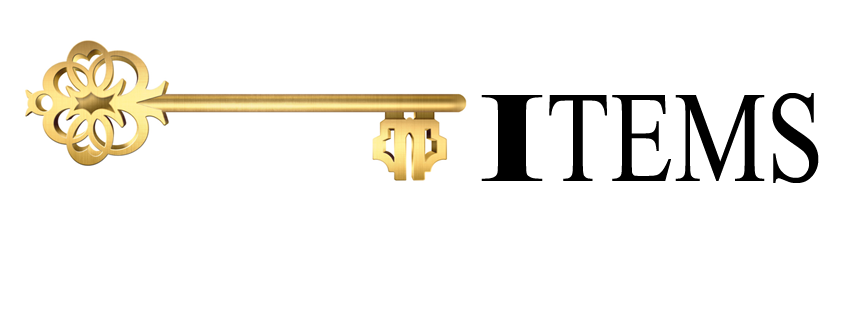
<style>
.page{position:relative;width:851px;height:315px;background:#ffffff}
.page>*{position:absolute;margin:0}
.t1{font:130px "TimesNewRomanPSMT";color:#000000;text-transform:uppercase;scale:0.8 1}
.t2{font:130px "TimesNewRomanPS-BoldMT";color:#000000;text-transform:uppercase;scale:1.35 1}
</style>
<div class="page">
<p class="t1" style="left:481px;top:93px;width:338px;height:90px"><span class="t2">I</span>tems</p>
</div>
